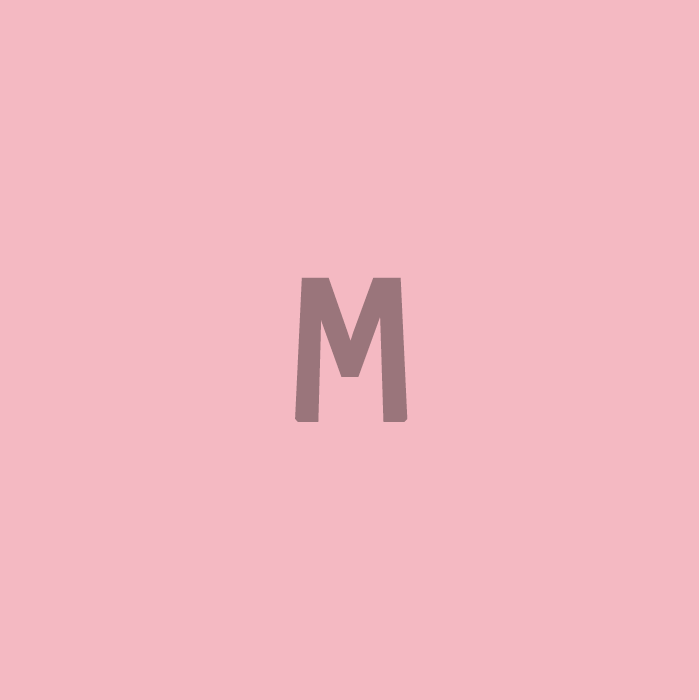
<style>
.page{position:relative;width:700px;height:700px;background:#f4b9c2}
.page>*{position:absolute;margin:0}
.t1{font:216.7px "Consolas";color:#9a757b;font-weight:bold}
</style>
<div class="page">
<p class="t1" style="left:295px;top:277px;width:113px;height:145px">M</p>
</div>
